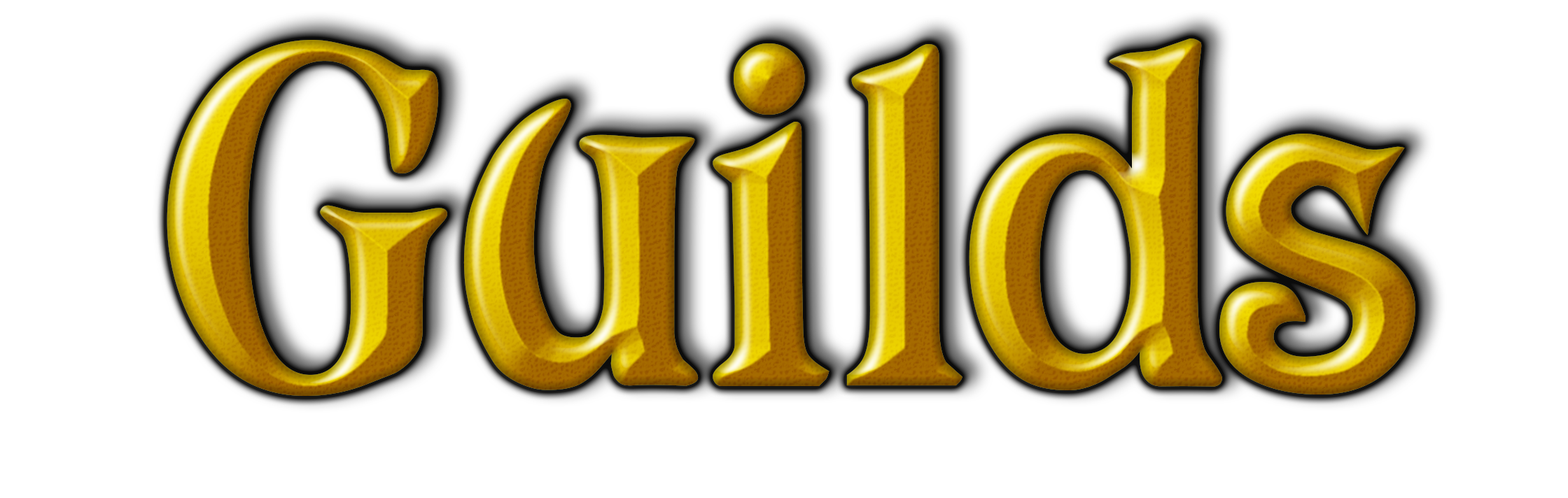
<style>
.page{position:relative;width:1568px;height:498px;background:#ffffff}
.page>*{position:absolute;margin:0}
.t1{font:472.2px "Avatar";letter-spacing:0.03em}
.t2{font:472.2px "Avatar";letter-spacing:-0.01em}
</style>
<div class="page">
<p class="t1" style="left:167px;top:38px;width:1248px;height:358px"><span class="t2">G</span>ui<span class="t2">ld</span>s</p>
<p class="t1" style="left:167px;top:38px;width:1248px;height:358px"><span class="t2">G</span>ui<span class="t2">ld</span>s</p>
</div>
